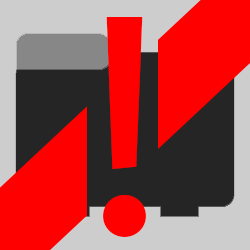
<style>
.page{position:relative;width:250px;height:250px;background:#ff0000}
.page>*{position:absolute;margin:0}
.t1{font:335.2px "Dubai-Regular";letter-spacing:0.01em;color:#ff0000}
</style>
<div class="page">
<p class="t1" style="left:103px;top:17px;width:43px;height:220px">!</p>
</div>
